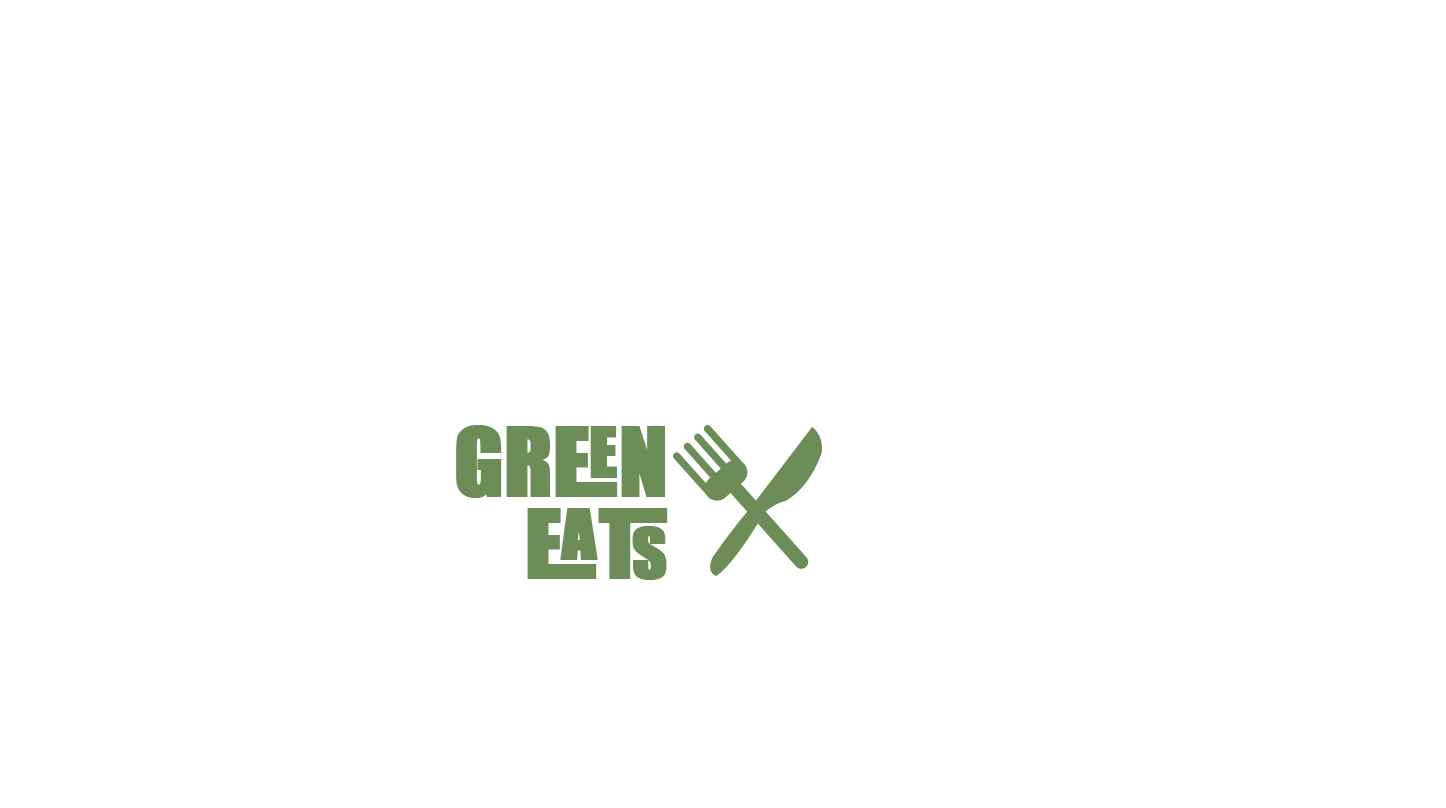
<style>
.page{position:relative;width:1446px;height:808px;background:#ffffff}
.page>*{position:absolute;margin:0}
.t1{font:89px "Impact";letter-spacing:-0.02em;color:#6c8d58;font-weight:bold}
.t2{font:89px "Impact";letter-spacing:-0.01em;color:#6c8d58;font-weight:bold}
</style>
<div class="page">
<p class="t1" style="left:456px;top:425px;width:209px;height:73px">GREEN</p>
<p class="t2" style="left:527px;top:508px;width:141px;height:72px">EATS</p>
</div>
